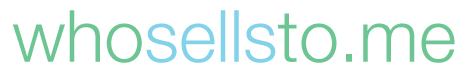
<style>
.page{position:relative;width:463px;height:74px;background:#ffffff}
.page>*{position:absolute;margin:0}
.t1{font:72px "HelveticaNeue-Light";color:#82d2ea}
.t2{font:72px "HelveticaNeue-Light";color:#6dc593}
</style>
<div class="page">
<p class="t1" style="left:12px;top:10px;width:443px;height:53px"><span class="t2">who</span>sells<span class="t2">to.me</span></p>
</div>
